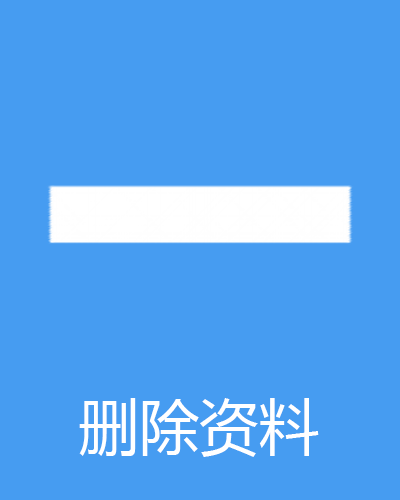
<style>
.page{position:relative;width:400px;height:500px;background:#469cf1}
.page>*{position:absolute;margin:0}
.t1{font:60px "MicrosoftYaHei";color:#ffffff}
</style>
<div class="page">
<p class="t1" style="left:79px;top:398px;width:240px;height:59px">删除资料</p>
</div>
